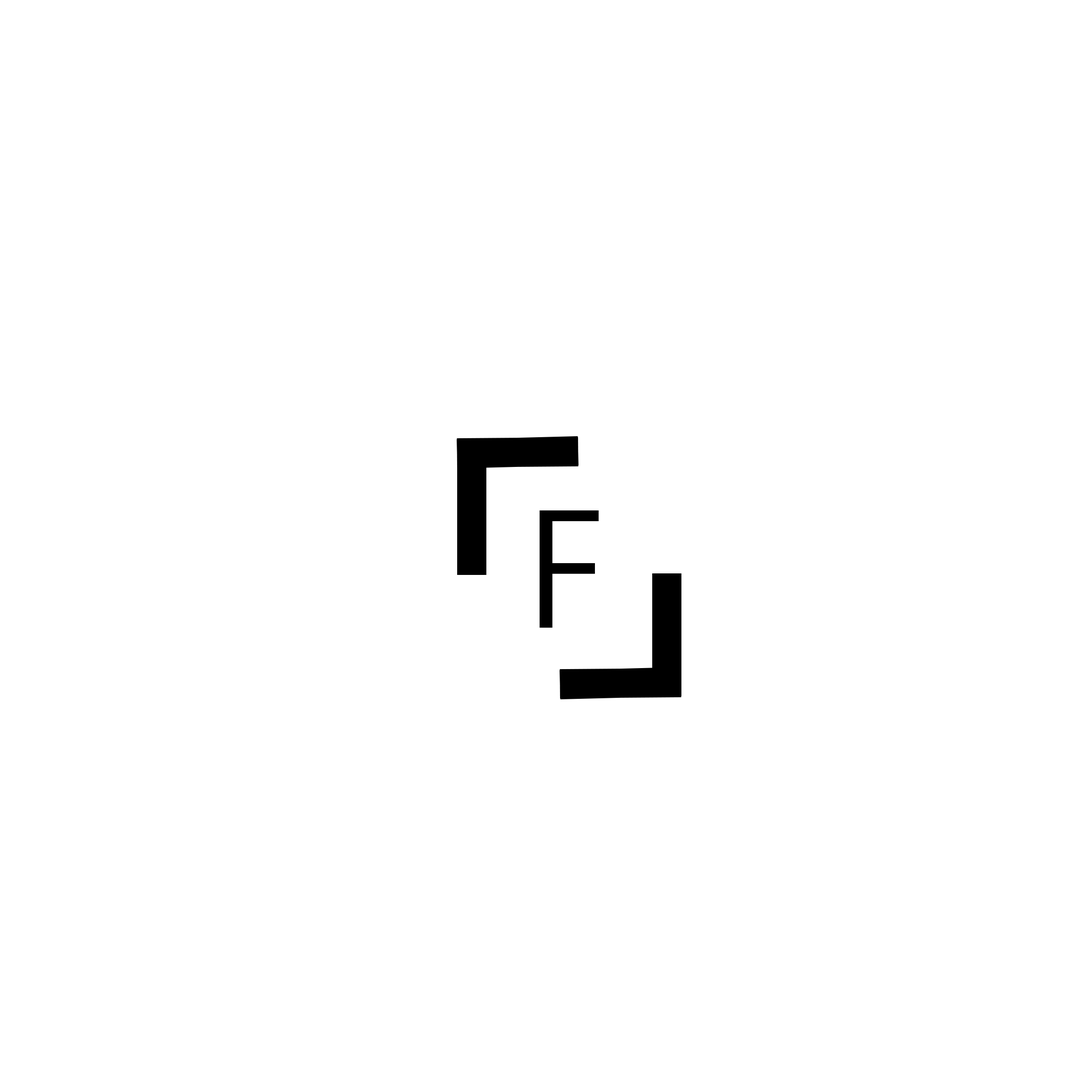
<style>
.page{position:relative;width:1092px;height:1092px;background:#ffffff}
.page>*{position:absolute;margin:0}
.t1{font:153.6px "KozGoPr6N-Regular";color:#000000}
</style>
<div class="page">
<p class="t1" style="left:540px;top:510px;width:59px;height:118px">F</p>
</div>
